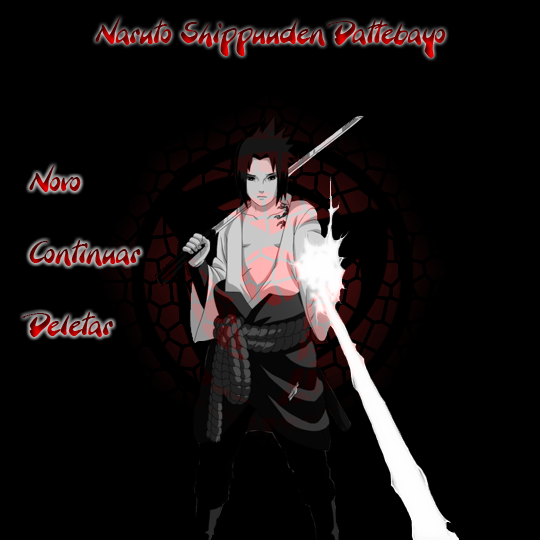
<style>
.page{position:relative;width:540px;height:540px;background:#000000}
.page>*{position:absolute;margin:0}
.t1{font:30px "BranchingMouse-Becker"}
</style>
<div class="page">
<p class="t1" style="left:95px;top:17px;width:351px;height:41px">Naruto Shippuuden Dattebayo</p>
<p class="t1" style="left:22px;top:165px;width:119px;height:172px">Novo<br><br>Continuar<br><br>Deletar</p>
</div>
